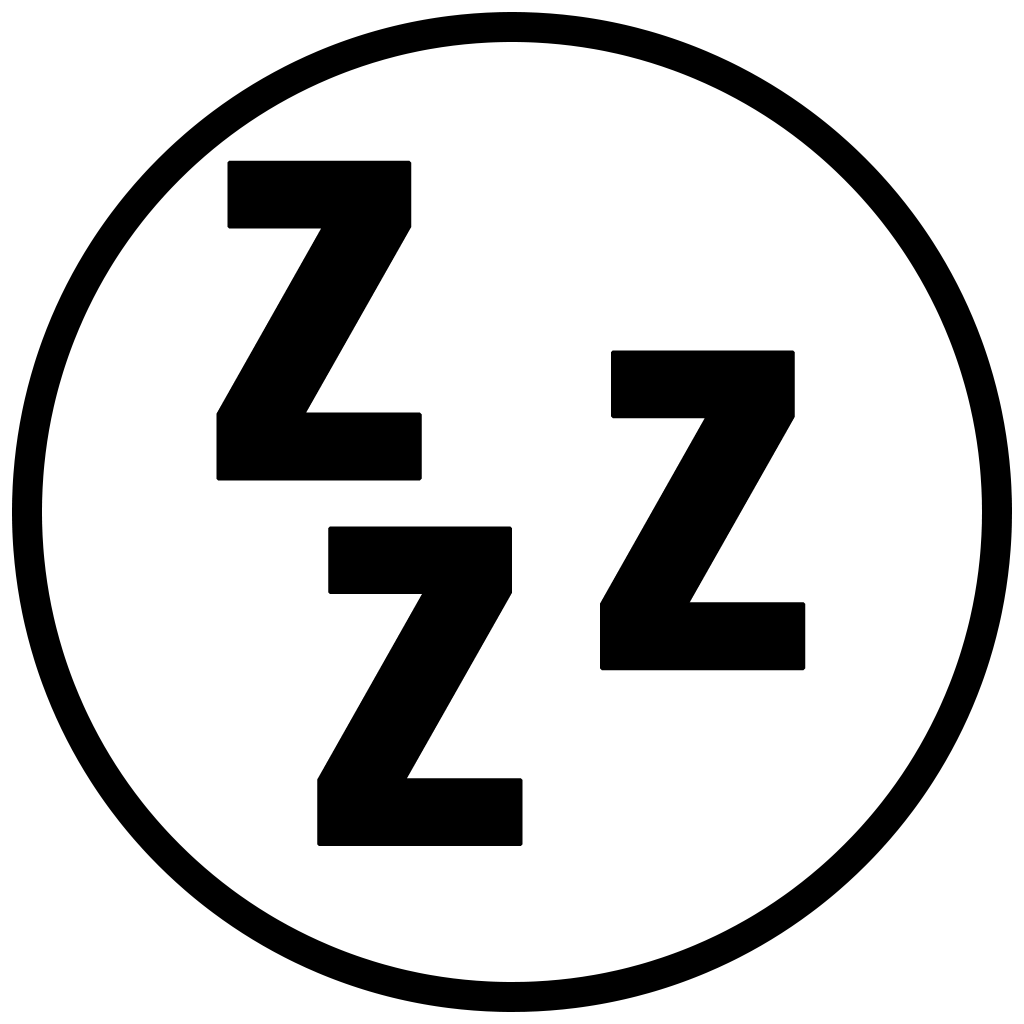
<style>
.page{position:relative;width:1024px;height:1024px;background:#ffffff}
.page>*{position:absolute;margin:0}
.t1{font:464.1px "AbadiMT-CondensedExtraBold";color:#000000;font-weight:bold}
</style>
<div class="page">
<p class="t1" style="left:216px;top:160px;width:206px;height:321px">Z</p>
<p class="t1" style="left:600px;top:350px;width:206px;height:321px">Z</p>
<p class="t1" style="left:317px;top:526px;width:206px;height:320px">Z</p>
</div>
